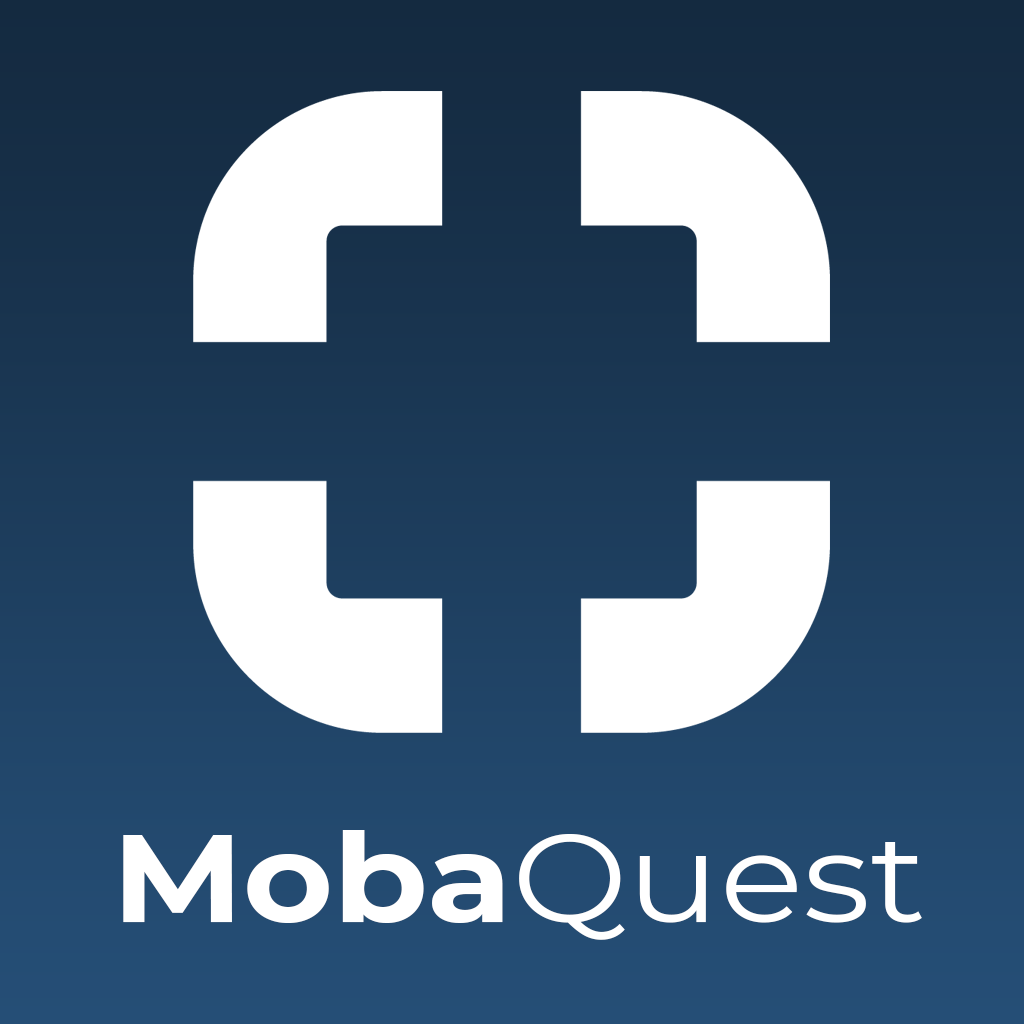
<style>
.page{position:relative;width:1024px;height:1024px}
.page>*{position:absolute;margin:0}
.t1{font:125px "Montserrat-Regular";color:#ffffff;scale:1.1 1}
.t2{font:125px "Montserrat-Bold";color:#ffffff;scale:1.1 1}
</style>
<div class="page">
<p class="t1" style="left:123px;top:830px;width:799px;height:110px"><span class="t2">Moba</span>Quest</p>
</div>
